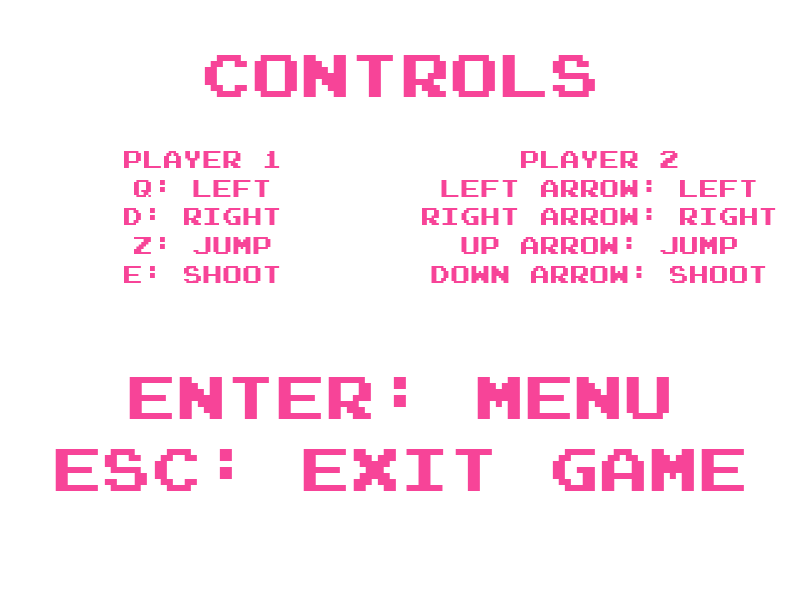
<style>
.page{position:relative;width:800px;height:600px;background:#ffffff}
.page>*{position:absolute;margin:0}
.t1{font:60px "JoystixMonospace-Regular";color:#f74498}
.t2{font:24px "JoystixMonospace-Regular";color:#f74498}
</style>
<div class="page">
<p class="t1" style="left:204px;top:55px;width:391px;height:42px">CONTROLS</p>
<p class="t2" style="left:124px;top:151px;width:156px;height:132px;text-align:center">PLAYER 1<br>Q: LEFT<br>D: RIGHT<br>Z: JUMP<br>E: SHOOT</p>
<p class="t2" style="left:422px;top:151px;width:354px;height:132px;text-align:center">PLAYER 2<br>LEFT ARROW: LEFT<br>RIGHT ARROW: RIGHT<br>UP ARROW: JUMP<br>DOWN ARROW: SHOOT</p>
<p class="t1" style="left:55px;top:377px;width:689px;height:114px;text-align:center">ENTER: MENU<br>ESC: EXIT GAME</p>
</div>
